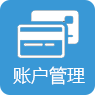
<style>
.page{position:relative;width:95px;height:95px;background:#3998d6}
.page>*{position:absolute;margin:0}
.t1{font:18px "MicrosoftYaHei";color:#ffffff}
</style>
<div class="page">
<p class="t1" style="left:13px;top:66px;width:72px;height:19px">账户管理</p>
</div>
